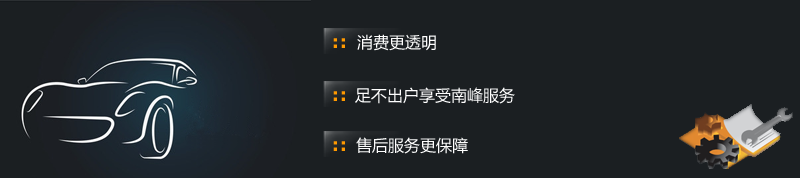
<style>
.page{position:relative;width:800px;height:178px;background:#1b1f22}
.page>*{position:absolute;margin:0}
.t1{font:18px "Verdana-Bold";letter-spacing:0.05em;color:#ff9900}
.t2{font:16px "MicrosoftYaHei";color:#fefefe}
</style>
<div class="page">
<p class="t1" style="left:333px;top:38px;width:12px;height:10px">::</p>
<p class="t2" style="left:357px;top:34px;width:79px;height:17px">消费更透明</p>
<p class="t2" style="left:355px;top:87px;width:160px;height:17px">足不出户享受南峰服务</p>
<p class="t1" style="left:333px;top:91px;width:12px;height:10px">::</p>
<p class="t2" style="left:356px;top:137px;width:112px;height:17px">售后服务更保障</p>
<p class="t1" style="left:333px;top:141px;width:12px;height:10px">::</p>
</div>
